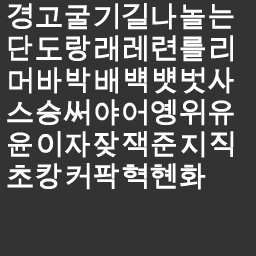
<style>
.page{position:relative;width:256px;height:256px;background:#333333}
.page>*{position:absolute;margin:0}
.t1{font:28px "ArialUnicodeMS";color:#ffffff;font-weight:bold}
</style>
<div class="page">
<p class="t1" style="left:7px;top:3px;width:227px;height:187px">경고굴기길나놀는<br>단도랑래레련를리<br>머바박배뱩뱻벗사<br>스승써야어옝위유<br>윤이자잦잭준지직<br>초캉커팍혁혠화</p>
</div>
